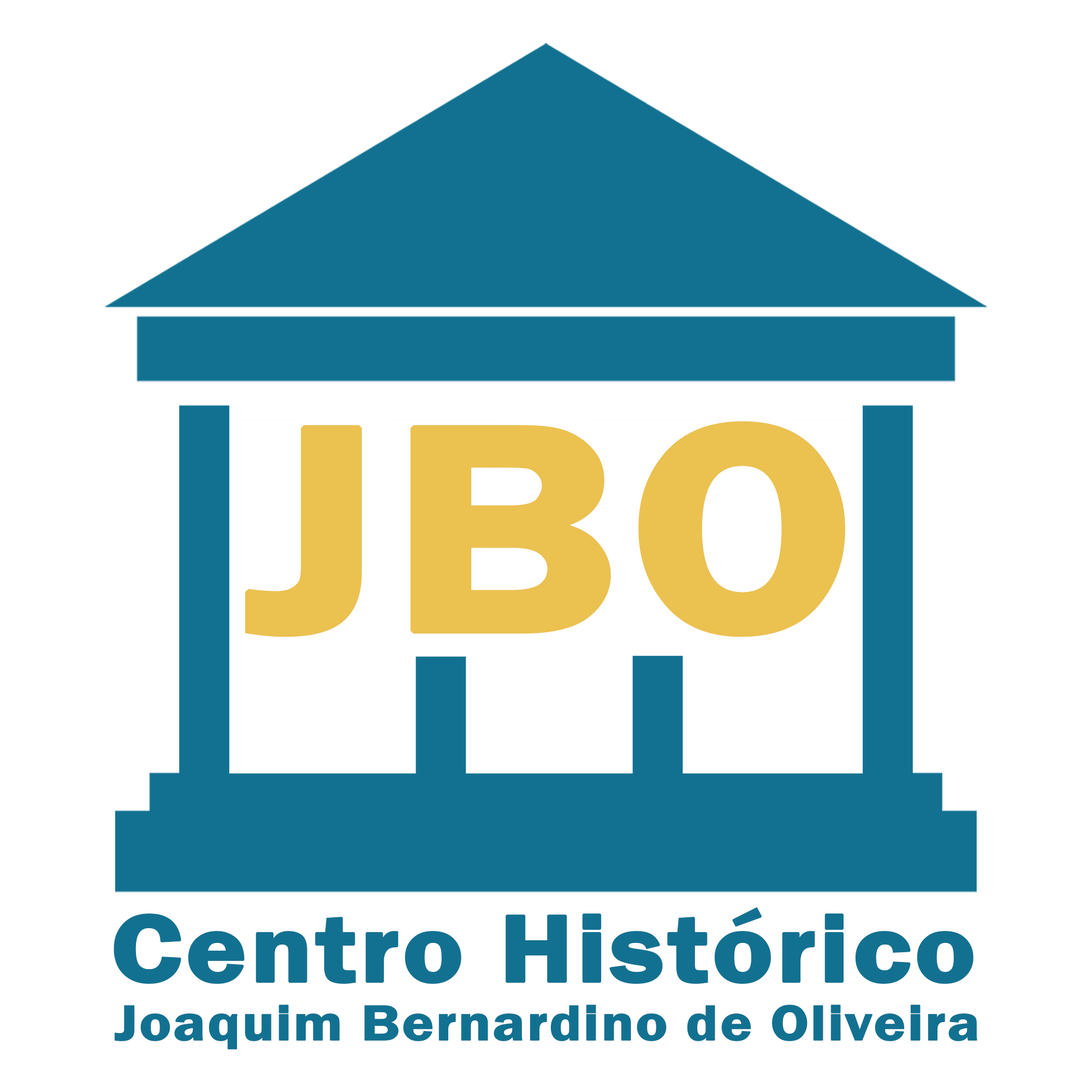
<style>
.page{position:relative;width:1092px;height:1092px;background:#ffffff}
.page>*{position:absolute;margin:0}
.t1{font:304.2px "FranklinGothic-Demi";color:#ebc150;font-weight:bold;scale:1.16 1}
.t2{font:98.9px "FranklinGothic-Demi";color:#127191;font-weight:bold;scale:1.16 1}
.t3{font:51.8px "FranklinGothic-Demi";color:#127191;font-weight:bold;scale:1.16 1}
</style>
<div class="page">
<p class="t1" style="left:245px;top:421px;width:600px;height:216px">JBO</p>
<p class="t2" style="left:114px;top:907px;width:860px;height:77px">Centro Histórico</p>
<p class="t3" style="left:114px;top:1005px;width:863px;height:44px">Joaquim Bernardino de Oliveira</p>
</div>
